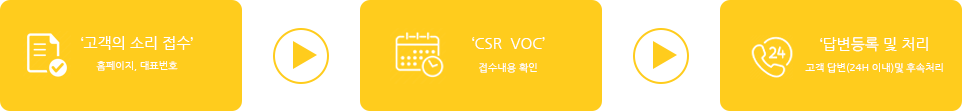
<style>
.page{position:relative;width:962px;height:111px;background:#ffcc1d}
.page>*{position:absolute;margin:0}
.t1{font:15px "NanumGothic";color:#ffffff}
.t2{font:10px "NanumGothic";color:#ffffff}
</style>
<div class="page">
<p class="t1" style="left:81px;top:36px;width:112px;height:14px">‘고객의 소리 접수’</p>
<p class="t1" style="left:472px;top:37px;width:73px;height:12px">‘CSR  VOC’</p>
<p class="t1" style="left:820px;top:37px;width:108px;height:15px">‘답변등록 및 처리</p>
<p class="t2" style="left:96px;top:61px;width:82px;height:10px">홈페이지, 대표번호</p>
<p class="t2" style="left:479px;top:63px;width:58px;height:10px">접수내용 확인</p>
<p class="t2" style="left:805px;top:63px;width:138px;height:10px">고객 답변(24H 이내)및 후속처리</p>
</div>
